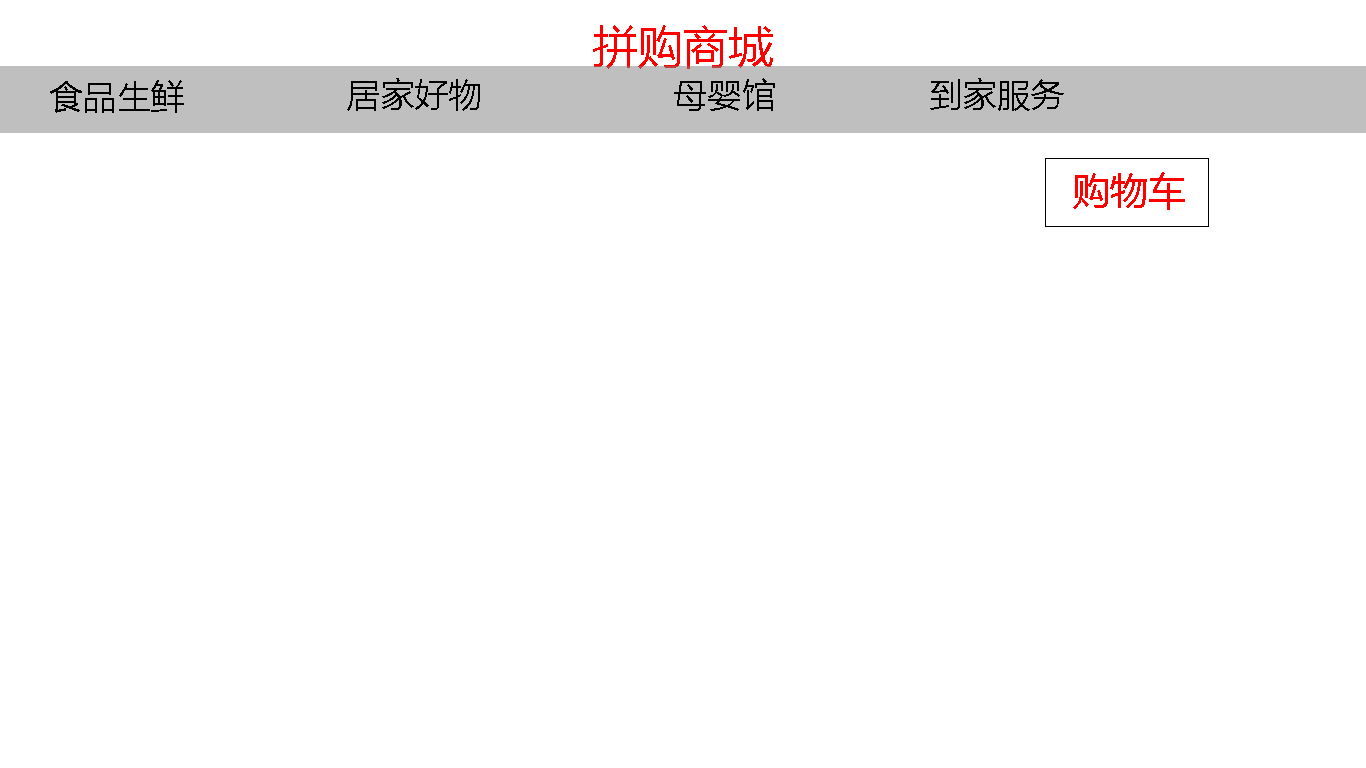
<style>
.page{position:relative;width:1366px;height:768px;background:#ffffff}
.page>*{position:absolute;margin:0}
.t1{font:45px "MicrosoftYaHei";color:#ff0000}
.t2{font:34px "MicrosoftYaHei";color:#000000}
.t3{font:38px "MicrosoftYaHei";color:#ff0000}
</style>
<div class="page">
<p class="t1" style="left:593px;top:25px;width:180px;height:44px">拼购商城</p>
<p class="t2" style="left:347px;top:78px;width:133px;height:33px">居家好物</p>
<p class="t2" style="left:674px;top:78px;width:101px;height:33px">母婴馆</p>
<p class="t2" style="left:930px;top:78px;width:134px;height:33px">到家服务</p>
<p class="t2" style="left:50px;top:80px;width:134px;height:33px">食品生鲜</p>
<p class="t3" style="left:1073px;top:172px;width:112px;height:38px">购物车</p>
</div>
